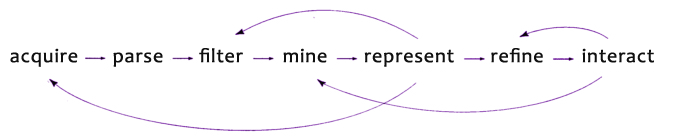
<style>
.page{position:relative;width:673px;height:140px;background:#ffffff}
.page>*{position:absolute;margin:0}
.t1{font:20px "Candara";letter-spacing:0.02em;color:#101010;font-weight:bold}
</style>
<div class="page">
<p class="t1" style="left:10px;top:48px;width:68px;height:19px">acquire</p>
<p class="t1" style="left:113px;top:52px;width:50px;height:15px">parse</p>
<p class="t1" style="left:199px;top:48px;width:44px;height:15px">filter</p>
<p class="t1" style="left:283px;top:48px;width:44px;height:15px">mine</p>
<p class="t1" style="left:364px;top:49px;width:90px;height:18px">represent</p>
<p class="t1" style="left:491px;top:48px;width:52px;height:15px">refine</p>
<p class="t1" style="left:582px;top:48px;width:72px;height:15px">interact</p>
</div>
